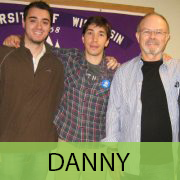
<style>
.page{position:relative;width:180px;height:180px}
.page>*{position:absolute;margin:0}
.t1{font:26.7px "MyriadPro-Regular";color:#030303}
</style>
<div class="page">
<p class="t1" style="left:49px;top:153px;width:81px;height:18px">DANNY</p>
</div>
